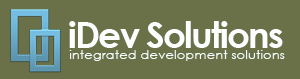
<style>
.page{position:relative;width:300px;height:79px;background:#6a7148}
.page>*{position:absolute;margin:0}
.t1{font:36px "CenturyGothic-Bold";letter-spacing:-0.05em;color:#fcfdfe}
.t2{font:12px "CenturyGothic";color:#f6fdfd;scale:1.1 1}
</style>
<div class="page">
<p class="t1" style="left:69px;top:21px;width:214px;height:27px">iDev Solutions</p>
<p class="t2" style="left:69px;top:50px;width:216px;height:11px">integrated development solutions</p>
</div>
